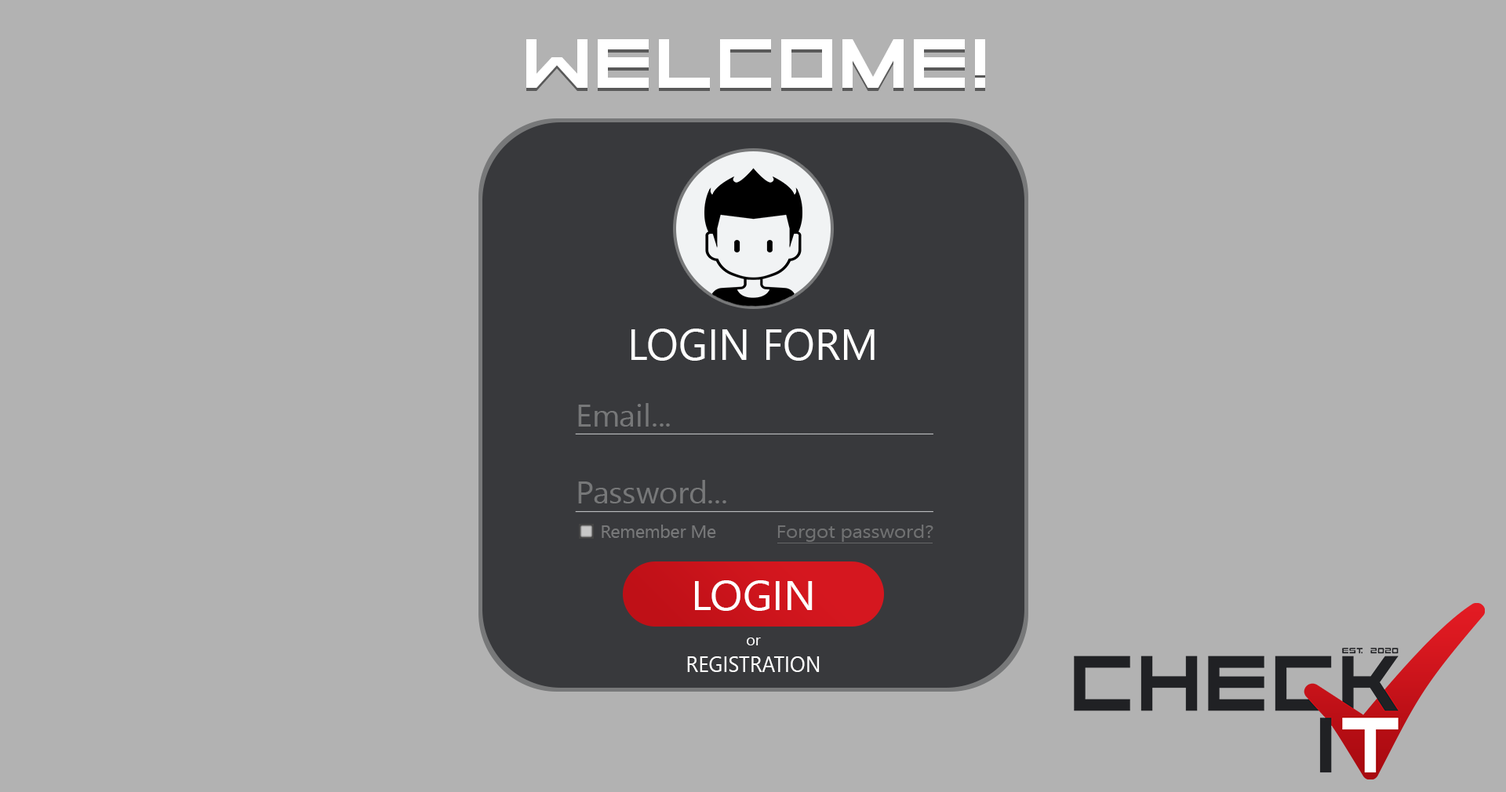
<style>
.page{position:relative;width:1506px;height:792px;background:#b2b2b2}
.page>*{position:absolute;margin:0}
.t1{font:63.7px "Aerial";color:#ffffff}
.t2{font:43.7px "SegoeUI";color:#ffffff}
.t3{font:31.7px "SegoeUI";color:#777879}
.t4{font:17.8px "SegoeUI";color:#777879}
.t5{font:17.8px "SegoeUI";color:#707172;scale:1.13 1}
.t6{font:41.6px "SegoeUI";color:#ffffff;scale:1.03 1}
.t7{font:15.5px "SegoeUI";color:#ffffff}
.t8{font:21.8px "SegoeUI";color:#ffffff;scale:0.94 1}
</style>
<div class="page">
<p class="t1" style="left:526px;top:39px;width:459px;height:49px">WELCOME!</p>
<p class="t2" style="left:631px;top:329px;width:243px;height:32px">LOGIN FORM</p>
<p class="t3" style="left:578px;top:403px;width:92px;height:24px">Email...</p>
<p class="t3" style="left:578px;top:480px;width:148px;height:23px">Password...</p>
<p class="t4" style="left:601px;top:525px;width:115px;height:13px">Remember Me</p>
<p class="t5" style="left:777px;top:525px;width:156px;height:17px">Forgot password?</p>
<p class="t6" style="left:695px;top:580px;width:117px;height:31px">LOGIN</p>
<p class="t7" style="left:747px;top:638px;width:14px;height:7px">or</p>
<p class="t8" style="left:687px;top:656px;width:132px;height:16px">REGISTRATION</p>
</div>
